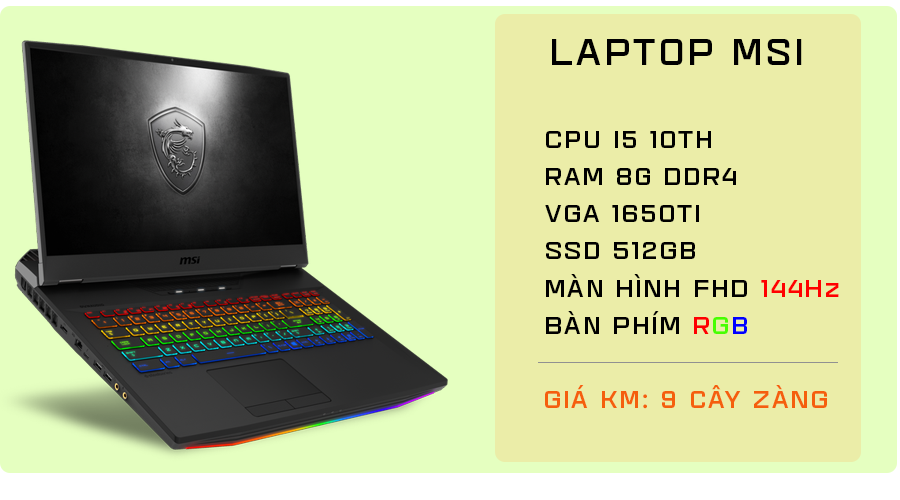
<style>
.page{position:relative;width:900px;height:500px;background:#ebeda8}
.page>*{position:absolute;margin:0}
.t1{font:36px "SVN-AgudaBlack";letter-spacing:0.1em;color:#000000}
.t2{font:24px/37.2px "SVN-AgudaBlack";letter-spacing:0.1em;color:#000000}
.t3{font:24px/37.2px "SVN-AgudaBlack";letter-spacing:0.1em;color:#ff0000}
.t4{font:24px/37.2px "SVN-AgudaBlack";letter-spacing:0.1em;color:#fe0000}
.t5{font:24px/37.2px "SVN-AgudaBlack";letter-spacing:0.1em;color:#48fe00}
.t6{font:24px/37.2px "SVN-AgudaBlack";letter-spacing:0.1em;color:#0000ff}
.t7{font:24px "SVN-AgudaBlack";letter-spacing:0.1em;color:#f55f0d}
</style>
<div class="page">
<p class="t1" style="left:552px;top:39px;width:250px;height:26px">LAPTOP MSI</p>
<p class="t2" style="left:545px;top:131px;width:294px;height:203px">CPU I5 10TH<br>RAM 8G DDR4<br>VGA 1650TI<br>SSD 512GB<br>MÀN HÌNH FHD <span class="t3">144Hz<br></span>BÀN PHÍM <span class="t4">R</span><span class="t5">G</span><span class="t6">B</span></p>
<p class="t7" style="left:545px;top:385px;width:282px;height:24px">GIÁ KM: 9 CÂY ZÀNG</p>
</div>
